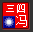
<style>
.page{position:relative;width:33px;height:32px;background:#f20000}
.page>*{position:absolute;margin:0}
.t1{font:10.4px "SimSun";color:#ffffff}
.t2{font:11.7px "SimSun";color:#ffffff}
</style>
<div class="page">
<p class="t1" style="left:6px;top:4px;width:19px;height:9px">三四</p>
<p class="t2" style="left:16px;top:15px;width:11px;height:12px">冯</p>
</div>
